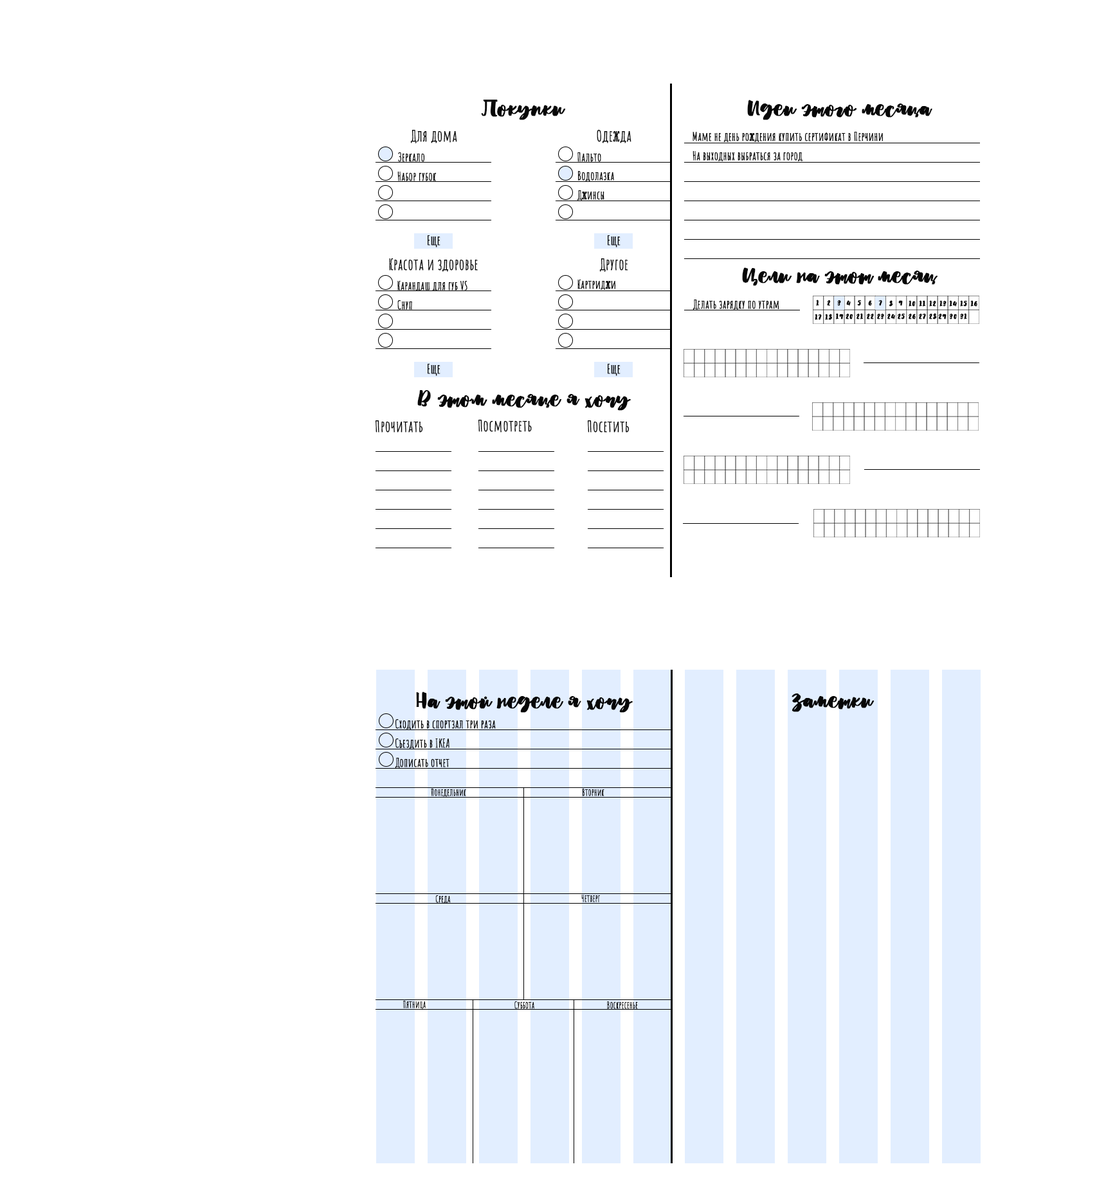
<style>
.page{position:relative;width:1115px;height:1180px;background:#ffffff}
.page>*{position:absolute;margin:0}
.t1{font:23.1px "RadioVolna-Regular";color:#070707;font-weight:bold}
.t2{font:15.4px "AmaticSC-Regular";color:#070707;font-weight:bold}
.t3{font:11.6px "AmaticSC-Regular";color:#070707;font-weight:bold}
.t4{font:12.9px "AmaticSC-Regular";color:#070707;font-weight:bold}
.t5{font:8.4px "RadioVolna-Regular";color:#070707;font-weight:bold}
.t6{font:9px "AmaticSC-Regular";color:#070707;font-weight:bold}
</style>
<div class="page">
<p class="t1" style="left:481px;top:100px;width:85px;height:20px">Покупки</p>
<p class="t1" style="left:747px;top:100px;width:185px;height:20px">Идеи этого месяца</p>
<p class="t2" style="left:410px;top:130px;width:47px;height:13px">Для дома</p>
<p class="t2" style="left:597px;top:130px;width:34px;height:13px">Одежда</p>
<p class="t3" style="left:692px;top:132px;width:191px;height:10px">Маме не день рождения купить сертификат в Перчини</p>
<p class="t3" style="left:398px;top:152px;width:27px;height:10px">Зеркало</p>
<p class="t3" style="left:577px;top:152px;width:24px;height:10px">Пальто</p>
<p class="t3" style="left:692px;top:151px;width:110px;height:10px">На выходных выбраться за город</p>
<p class="t3" style="left:397px;top:172px;width:40px;height:9px">Набор губок</p>
<p class="t3" style="left:577px;top:171px;width:37px;height:10px">Водолазка</p>
<p class="t3" style="left:577px;top:190px;width:27px;height:11px">Джинсы</p>
<p class="t4" style="left:428px;top:235px;width:12px;height:13px">Еще</p>
<p class="t4" style="left:608px;top:235px;width:12px;height:13px">Еще</p>
<p class="t2" style="left:389px;top:258px;width:89px;height:14px">Красота и здоровье</p>
<p class="t2" style="left:599px;top:258px;width:29px;height:14px">Другое</p>
<p class="t1" style="left:742px;top:267px;width:196px;height:19px">Цели на этот месяц</p>
<p class="t3" style="left:397px;top:281px;width:70px;height:10px">Карандаш для губ VS</p>
<p class="t3" style="left:577px;top:280px;width:38px;height:10px">Картриджи</p>
<p class="t3" style="left:397px;top:300px;width:15px;height:10px">Снуп</p>
<p class="t3" style="left:692px;top:300px;width:87px;height:10px">Делать зарядку по утрам</p>
<p class="t5" style="left:816px;top:300px;width:3px;height:6px">1</p>
<p class="t5" style="left:827px;top:300px;width:4px;height:6px">2</p>
<p class="t5" style="left:837px;top:300px;width:4px;height:6px">3</p>
<p class="t5" style="left:846px;top:300px;width:5px;height:6px">4</p>
<p class="t5" style="left:857px;top:300px;width:4px;height:6px">5</p>
<p class="t5" style="left:868px;top:300px;width:4px;height:6px">6</p>
<p class="t5" style="left:878px;top:300px;width:4px;height:6px">7</p>
<p class="t5" style="left:888px;top:300px;width:5px;height:7px">8</p>
<p class="t5" style="left:898px;top:300px;width:5px;height:6px">9</p>
<p class="t5" style="left:908px;top:300px;width:7px;height:7px">10</p>
<p class="t5" style="left:919px;top:300px;width:6px;height:7px">11</p>
<p class="t5" style="left:929px;top:300px;width:7px;height:7px">12</p>
<p class="t5" style="left:939px;top:300px;width:7px;height:7px">13</p>
<p class="t5" style="left:949px;top:300px;width:8px;height:7px">14</p>
<p class="t5" style="left:960px;top:300px;width:7px;height:7px">15</p>
<p class="t5" style="left:970px;top:300px;width:7px;height:7px">16</p>
<p class="t5" style="left:815px;top:314px;width:7px;height:6px">17</p>
<p class="t5" style="left:825px;top:314px;width:7px;height:6px">18</p>
<p class="t5" style="left:835px;top:313px;width:8px;height:7px">19</p>
<p class="t5" style="left:845px;top:314px;width:8px;height:6px">20</p>
<p class="t5" style="left:856px;top:313px;width:7px;height:7px">21</p>
<p class="t5" style="left:866px;top:314px;width:8px;height:6px">22</p>
<p class="t5" style="left:876px;top:314px;width:8px;height:6px">23</p>
<p class="t5" style="left:887px;top:314px;width:8px;height:6px">24</p>
<p class="t5" style="left:897px;top:314px;width:8px;height:6px">25</p>
<p class="t5" style="left:908px;top:314px;width:7px;height:6px">26</p>
<p class="t5" style="left:918px;top:314px;width:8px;height:6px">27</p>
<p class="t5" style="left:928px;top:313px;width:9px;height:7px">28</p>
<p class="t5" style="left:938px;top:314px;width:8px;height:6px">29</p>
<p class="t5" style="left:949px;top:314px;width:8px;height:6px">30</p>
<p class="t5" style="left:960px;top:313px;width:7px;height:7px">31</p>
<p class="t4" style="left:428px;top:364px;width:12px;height:12px">Еще</p>
<p class="t4" style="left:608px;top:364px;width:12px;height:12px">Еще</p>
<p class="t1" style="left:417px;top:390px;width:214px;height:21px">В этом месяце я хочу</p>
<p class="t2" style="left:375px;top:420px;width:48px;height:13px">Прочитать</p>
<p class="t2" style="left:478px;top:420px;width:54px;height:13px">Посмотреть</p>
<p class="t2" style="left:587px;top:420px;width:42px;height:13px">Посетить</p>
<p class="t1" style="left:416px;top:692px;width:217px;height:21px">На этой неделе я хочу</p>
<p class="t1" style="left:791px;top:694px;width:83px;height:18px">Заметки</p>
<p class="t3" style="left:395px;top:719px;width:101px;height:11px">Сходить в спортзал три раза</p>
<p class="t3" style="left:395px;top:739px;width:54px;height:10px">Съездить в IKEA</p>
<p class="t3" style="left:395px;top:758px;width:54px;height:10px">Дописать отчет</p>
<p class="t6" style="left:431px;top:789px;width:35px;height:8px">Понедельник</p>
<p class="t6" style="left:582px;top:789px;width:22px;height:8px">Вторник</p>
<p class="t6" style="left:435px;top:896px;width:16px;height:8px">Среда</p>
<p class="t6" style="left:581px;top:895px;width:19px;height:8px">Четверг</p>
<p class="t6" style="left:403px;top:1001px;width:23px;height:8px">Пятница</p>
<p class="t6" style="left:514px;top:1002px;width:20px;height:7px">Суббота</p>
<p class="t6" style="left:607px;top:1002px;width:31px;height:7px">Воскресенье</p>
</div>
